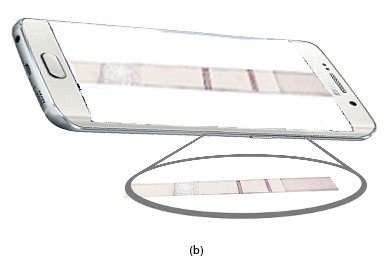
<style>
.page{position:relative;width:390px;height:268px;background:#ffffff}
.page>*{position:absolute;margin:0}
.t1{font:12px "MyriadPro-Regular";color:#000000}
</style>
<div class="page">
<p class="t1" style="left:190px;top:245px;width:13px;height:11px">(b)</p>
</div>
